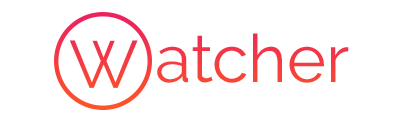
<style>
.page{position:relative;width:400px;height:120px;background:#ffffff}
.page>*{position:absolute;margin:0}
.t1{font:66.4px "Raleway-Regular";color:#f53c40}
</style>
<div class="page">
<p class="t1" style="left:157px;top:33px;width:192px;height:50px">atcher</p>
</div>
